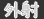
<style>
.page{position:relative;width:44px;height:19px;background:#333333}
.page>*{position:absolute;margin:0}
.t1{font:20px "¢è?";color:#cacaca}
</style>
<div class="page">
<p class="t1" style="left:4px;top:1px;width:35px;height:17px">外射</p>
</div>
